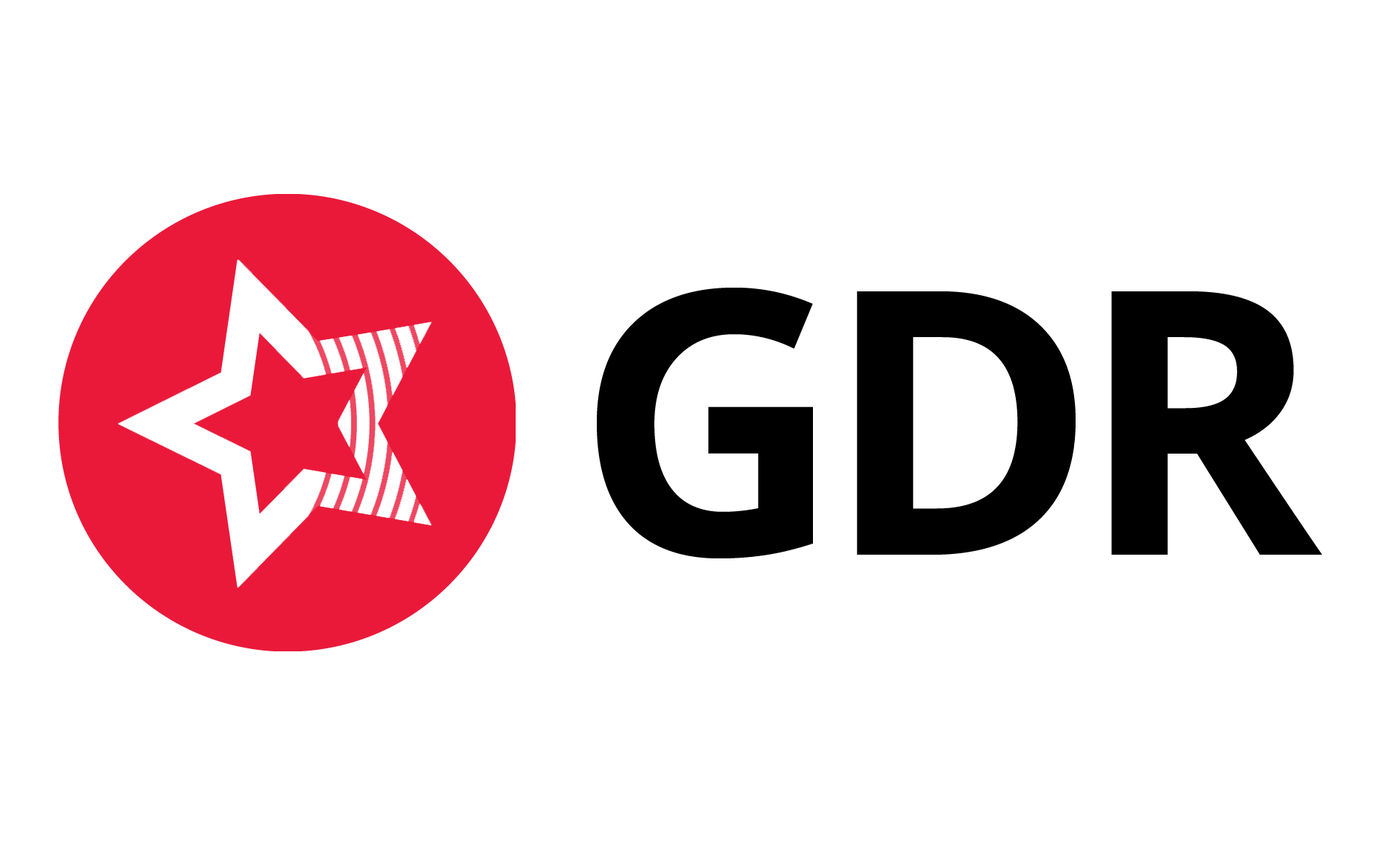
<style>
.page{position:relative;width:1381px;height:863px;background:#ffffff}
.page>*{position:absolute;margin:0}
.t1{font:368.9px "OpenSans-Bold";letter-spacing:-0.05em;color:#000000}
</style>
<div class="page">
<p class="t1" style="left:597px;top:288px;width:725px;height:271px">GDR</p>
</div>
